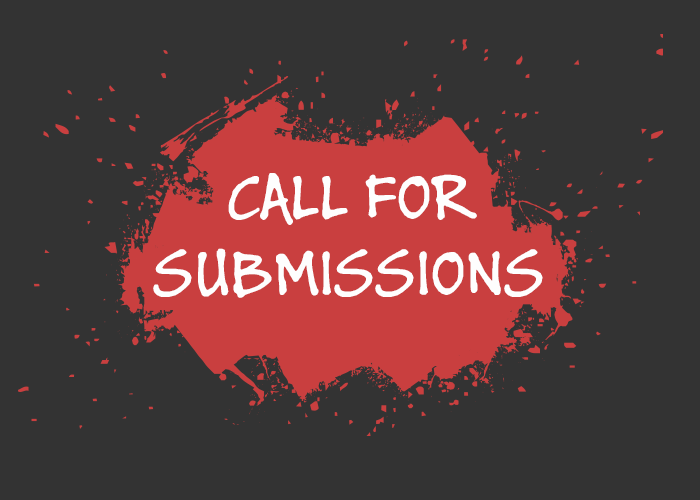
<style>
.page{position:relative;width:700px;height:500px;background:#333333}
.page>*{position:absolute;margin:0}
.t1{font:72px/75.7px "BuxtonSketch";color:#fefefe;font-variant:small-caps}
</style>
<div class="page">
<p class="t1" style="left:153px;top:173px;width:390px;height:125px;text-align:center">CALL FOR<br>SUBMISSIONS</p>
</div>
